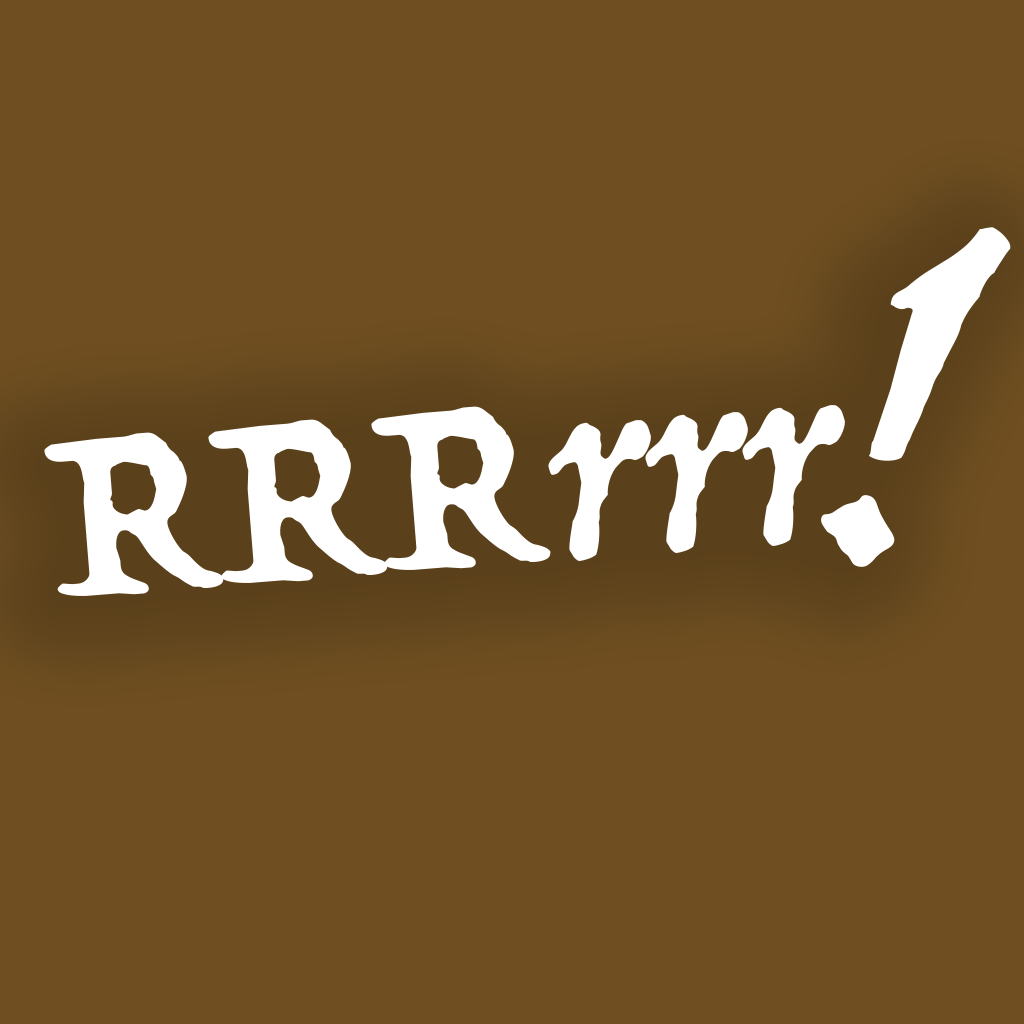
<style>
.page{position:relative;width:1024px;height:1024px;background:#6f4f21}
.page>*{position:absolute;margin:0}
.t1{font:390.9px "Trattatello";color:#ffffff;scale:1.14 1}
.t2{font:266.7px "Trattatello";color:#ffffff}
</style>
<div class="page">
<p class="t1" style="left:821px;top:227px;width:190px;height:340px;rotate:11deg">!</p>
<p class="t2" style="left:44px;top:405px;width:801px;height:191px;rotate:-5deg">RRRrrr</p>
</div>
